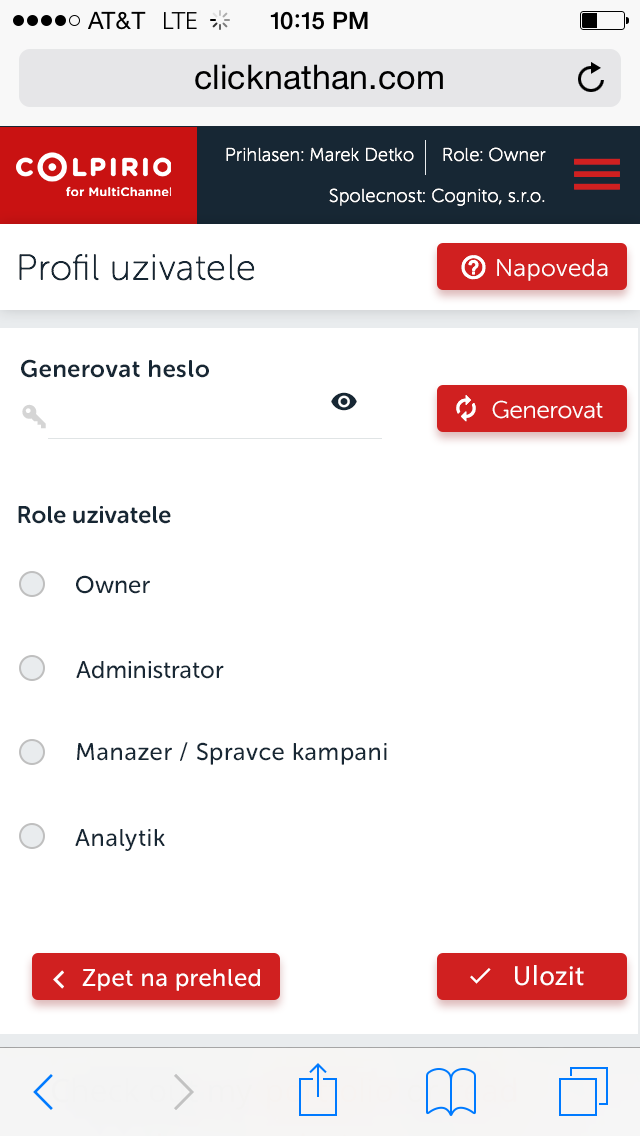
<style>
.page{position:relative;width:640px;height:1136px;background:#ffffff}
.page>*{position:absolute;margin:0}
.t1{font:18px "MuseoSansRounded-100";letter-spacing:0.025em;color:#ffffff}
.t2{font:36px "MuseoSansRounded-100";letter-spacing:0.025em;color:#172734}
.t3{font:24px "MuseoSansRounded-300";letter-spacing:0.025em;color:#ffffff}
.t4{font:24px "MuseoSansRounded-700";letter-spacing:0.025em;color:#172734}
.t5{font:24px "MuseoSansRounded-300";color:#ffffff}
.t6{font:24px "MuseoSansRounded-700";color:#172734}
.t7{font:24px "MuseoSansRounded-500";color:#172734}
.t8{font:24px "MuseoSansRounded-500";letter-spacing:0.025em;color:#172734}
.t9{font:28px "MyriadPro-Regular";letter-spacing:0.025em;color:#ffffff}
.t10{font:24px "MuseoSansRounded-500";letter-spacing:0.025em;color:#ffffff}
</style>
<div class="page">
<p class="t1" style="left:226px;top:147px;width:188px;height:15px">Prihlasen: Marek Detko</p>
<p class="t1" style="left:443px;top:147px;width:103px;height:15px">Role: Owner</p>
<p class="t1" style="left:329px;top:188px;width:216px;height:18px">Spolecnost: Cognito, s.r.o.</p>
<p class="t2" style="left:19px;top:254px;width:236px;height:27px">Profil uzivatele</p>
<p class="t3" style="left:497px;top:259px;width:111px;height:22px">Napoveda</p>
<p class="t4" style="left:21px;top:359px;width:188px;height:19px">Generovat heslo</p>
<p class="t5" style="left:492px;top:400px;width:111px;height:19px">Generovat</p>
<p class="t6" style="left:18px;top:506px;width:153px;height:18px">Role uzivatele</p>
<p class="t7" style="left:76px;top:575px;width:74px;height:19px">Owner</p>
<p class="t7" style="left:76px;top:661px;width:148px;height:18px">Administrator</p>
<p class="t8" style="left:77px;top:742px;width:310px;height:23px">Manazer / Spravce kampani</p>
<p class="t8" style="left:75px;top:829px;width:90px;height:22px">Analytik</p>
<p class="t9" style="left:515px;top:965px;width:69px;height:21px">Ulozit</p>
<p class="t10" style="left:82px;top:969px;width:178px;height:22px">Zpet na prehled</p>
</div>
